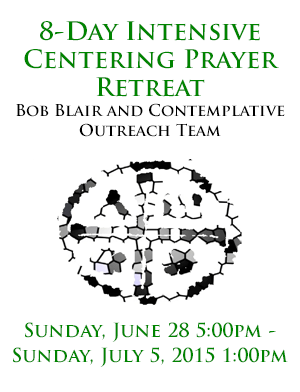
<style>
.page{position:relative;width:300px;height:392px;background:#ffffff}
.page>*{position:absolute;margin:0}
.t1{font:16px/20px "TrajanPro-Bold";color:#000000}
.t2{font:25px/28px "TrajanPro-Bold";color:#008400}
.t3{font:19px/25px "TrajanPro-Bold";color:#008400}
</style>
<div class="page">
<p class="t1" style="left:16px;top:21px;width:269px;height:116px;text-align:center"><span class="t2">8-Day Intensive Centering Prayer Retreat<br></span>Bob Blair and Contemplative Outreach Team</p>
<p class="t3" style="left:13px;top:322px;width:275px;height:45px;text-align:center">Sunday, June 28 5:00pm - <br>Sunday, July 5, 2015 1:00pm</p>
</div>
